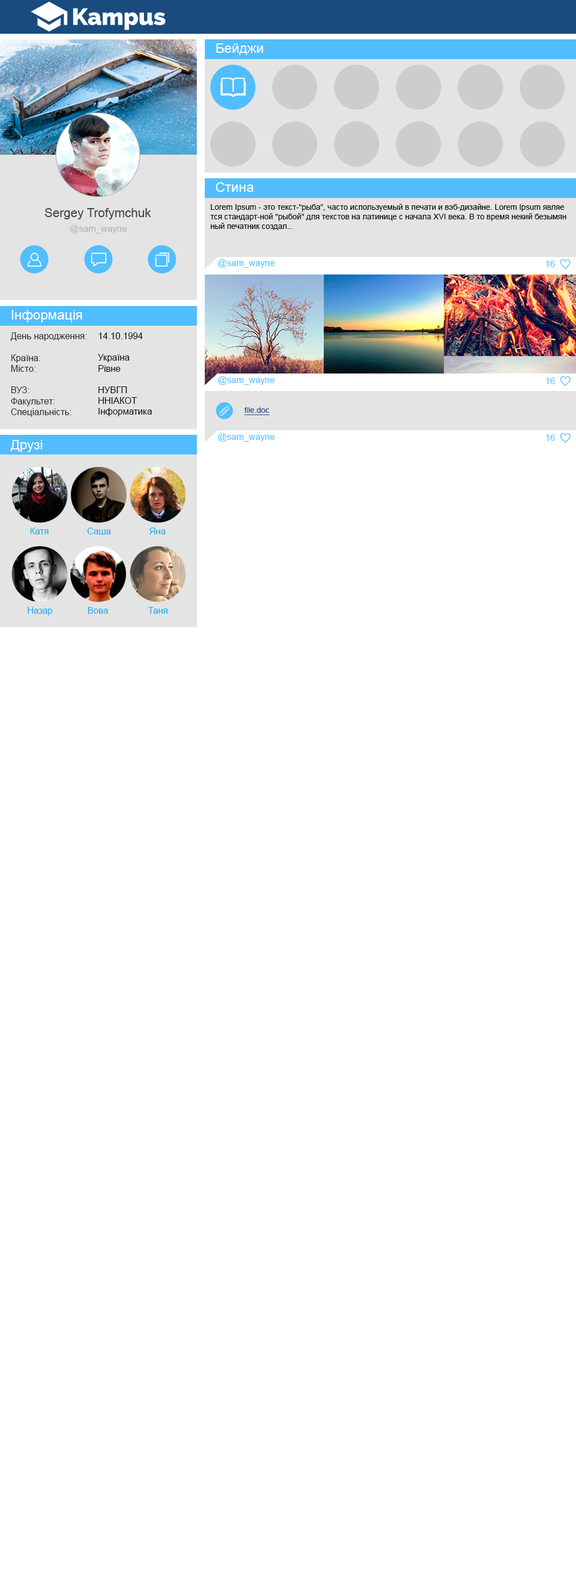
<style>
.page{position:relative;width:576px;height:1575px;background:#ffffff}
.page>*{position:absolute;margin:0}
.t1{font:13.5px "ArialMT";color:#ffffff}
.t2{font:12.4px "ArialMT";color:#404040}
.t3{font:7.9px "ArialMT";color:#000000}
.t4{font:9px "ArialMT";color:#b2b2b2}
.t5{font:9px "ArialMT";color:#51beff}
.t6{font:9px "ArialMT";color:#242424}
.t7{font:9px "ArialMT";color:#000000}
.t8{font:7.9px "ArialMT";color:#194b7f;text-decoration:underline}
.t9{font:9px "ArialMT";color:#00aef1}
</style>
<div class="page">
<p class="t1" style="left:216px;top:43px;width:47px;height:12px">Бейджи</p>
<p class="t1" style="left:215px;top:182px;width:39px;height:10px">Стина</p>
<p class="t2" style="left:44px;top:208px;width:107px;height:11px">Sergey Trofymchuk</p>
<p class="t3" style="left:210px;top:204px;width:356px;height:26px">Lorem Ipsum - это текст-"рыба", часто используемый в печати и вэб-дизайне. Lorem Ipsum являе<br>тся стандарт-ной "рыбой" для текстов на латинице с начала XVI века. В то время некий безымян<br>ный печатник создал...</p>
<p class="t4" style="left:70px;top:225px;width:57px;height:8px">@sam_wayne</p>
<p class="t5" style="left:218px;top:259px;width:57px;height:9px">@sam_wayne</p>
<p class="t5" style="left:546px;top:260px;width:9px;height:7px">16</p>
<p class="t1" style="left:12px;top:310px;width:70px;height:12px">Інформація</p>
<p class="t6" style="left:10px;top:332px;width:77px;height:85px">День народження:<br><br>Країна:<br>Місто:<br><br>ВУЗ:<br>Факультет:<br>Спеціальність:</p>
<p class="t7" style="left:98px;top:332px;width:54px;height:84px">14.10.1994<br><br>Україна<br>Рівне<br><br>НУВГП<br>ННІАКОТ<br>Інформатика</p>
<p class="t5" style="left:218px;top:376px;width:57px;height:9px">@sam_wayne</p>
<p class="t5" style="left:546px;top:377px;width:9px;height:7px">16</p>
<p class="t8" style="left:244px;top:407px;width:25px;height:8px">file.doc</p>
<p class="t5" style="left:218px;top:433px;width:57px;height:9px">@sam_wayne</p>
<p class="t5" style="left:546px;top:434px;width:9px;height:7px">16</p>
<p class="t1" style="left:10px;top:440px;width:32px;height:12px">Друзі</p>
<p class="t9" style="left:30px;top:528px;width:18px;height:6px">Катя</p>
<p class="t9" style="left:87px;top:528px;width:24px;height:6px">Саша</p>
<p class="t9" style="left:149px;top:528px;width:16px;height:6px">Яна</p>
<p class="t9" style="left:28px;top:607px;width:25px;height:8px">Назар</p>
<p class="t9" style="left:88px;top:607px;width:20px;height:7px">Вова</p>
<p class="t9" style="left:148px;top:607px;width:20px;height:7px">Таня</p>
</div>
